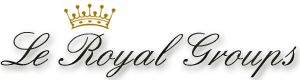
<style>
.page{position:relative;width:300px;height:80px;background:#ffffff}
.page>*{position:absolute;margin:0}
.t1{font:48.6px "English";color:#434343}
</style>
<div class="page">
<p class="t1" style="left:0px;top:32px;width:297px;height:46px">Le Royal Groups</p>
</div>
